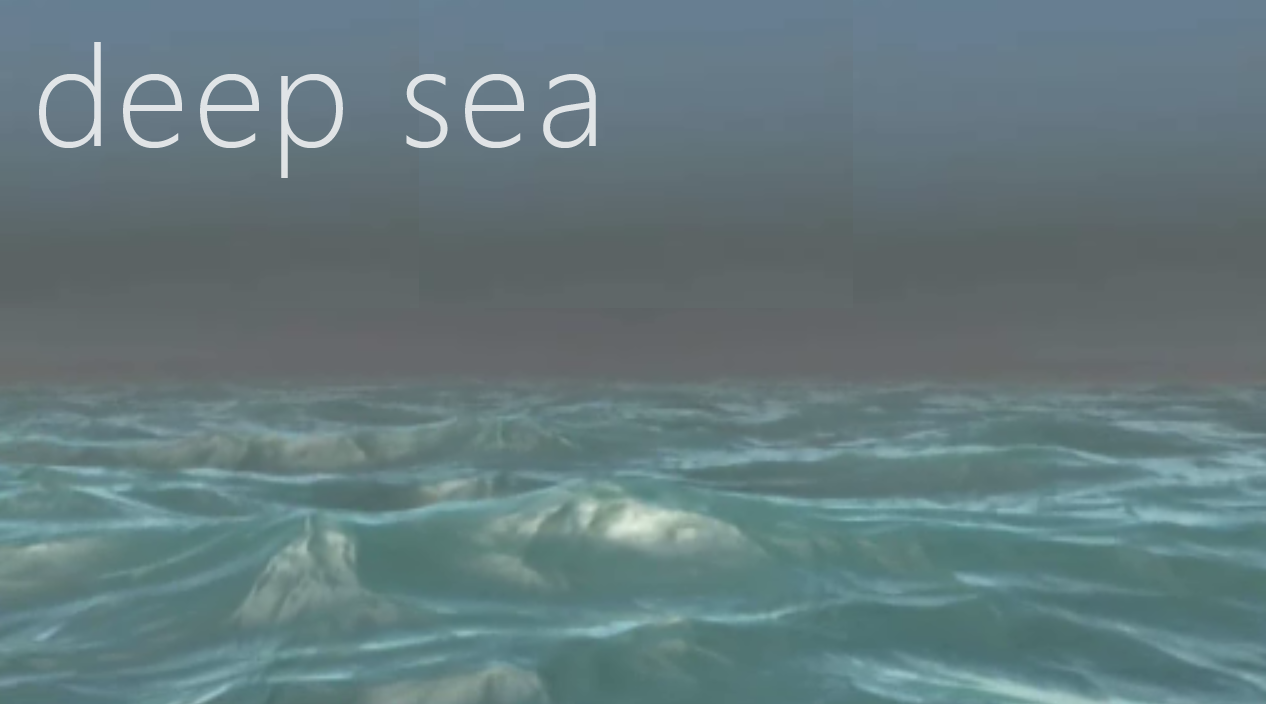
<style>
.page{position:relative;width:1266px;height:704px}
.page>*{position:absolute;margin:0}
.t1{font:140.6px "SegoeUI-Light";letter-spacing:0.04em;color:#e0e4e7}
</style>
<div class="page">
<p class="t1" style="left:39px;top:42px;width:557px;height:136px">deep sea</p>
</div>
